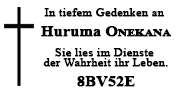
<style>
.page{position:relative;width:181px;height:96px;background:#ffffff}
.page>*{position:absolute;margin:0}
.t1{font:11px/10px "TimesNewRomanPSMT";color:#000000;font-weight:bold;scale:1.12 1}
.t2{font:14px/10px "TimesNewRomanPS-BoldMT";color:#000000;font-weight:bold;scale:1.12 1}
.t3{font:14px/10px "TimesNewRomanPS-BoldMT";color:#000000;font-variant:small-caps;font-weight:bold;scale:1.12 1}
</style>
<div class="page">
<p class="t1" style="left:41px;top:8px;width:130px;height:79px;text-align:center">In tiefem Gedenken an <br><br><span class="t2">Huruma </span><span class="t3">Onekana<br><br></span>Sie lies im Dienste <br>der Wahrheit ihr Leben.<br><br><span class="t2">8BV52E</span></p>
</div>
